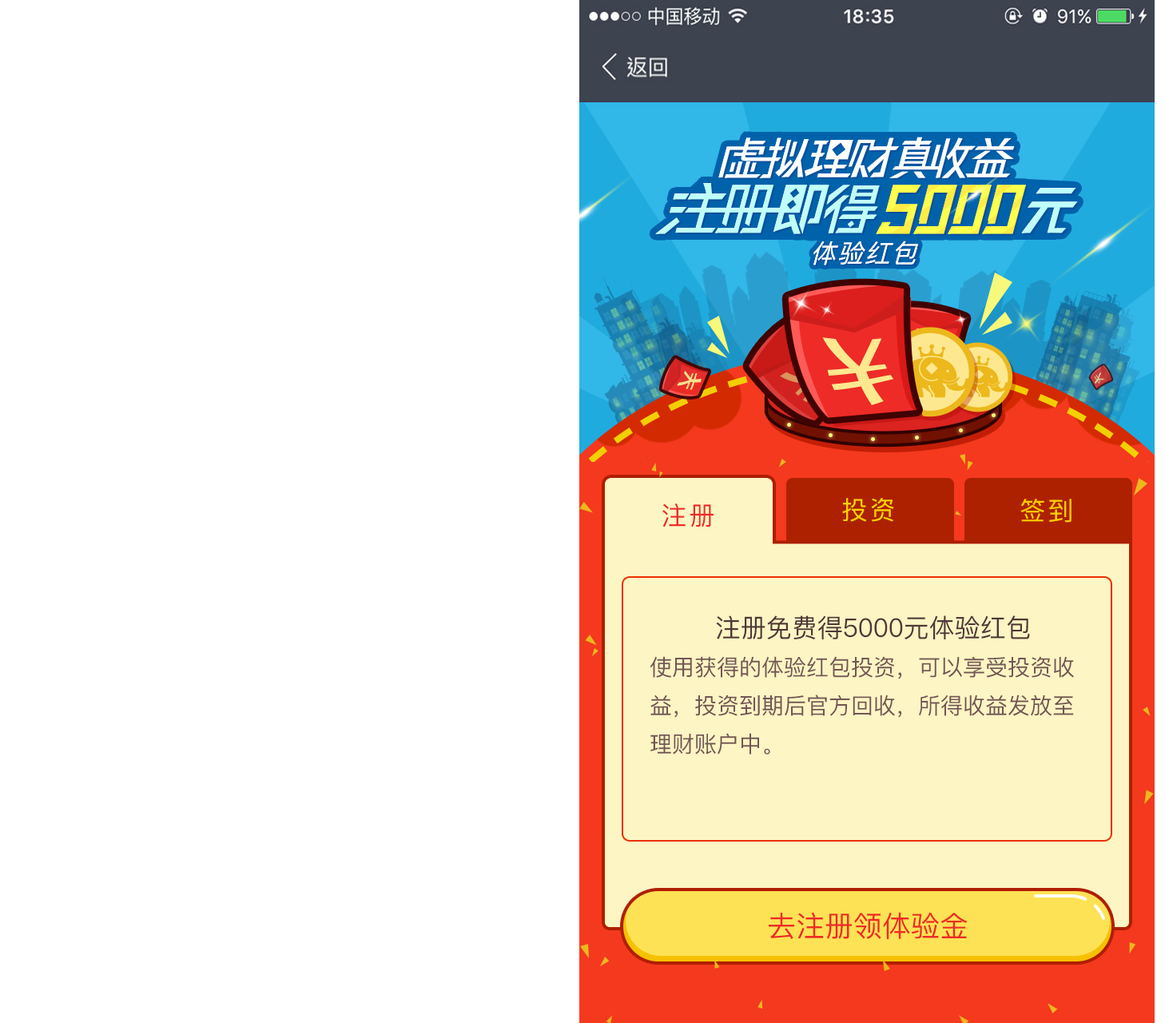
<style>
.page{position:relative;width:1165px;height:1023px;background:#ffffff}
.page>*{position:absolute;margin:0}
.t1{font:26.3px "PingFangSC-Regular";color:#ffffff;scale:0.97 1}
.t2{font:25.6px "PingFangSC-Regular";letter-spacing:0.1em;color:#fcd301;text-transform:uppercase}
.t3{font:25.6px "PingFangSC-Regular";letter-spacing:0.1em;color:#ee2b27;text-transform:uppercase}
.t4{font:25.6px "PingFangSC-Regular";letter-spacing:0.1em;color:#ffcc00;text-transform:uppercase}
.t5{font:22.4px/38.4px "PingFangSC-Regular";color:#735554;text-transform:uppercase}
.t6{font:25.6px/38.4px "PingFangSC-Regular";color:#513736;text-transform:uppercase}
.t7{font:28.8px "PingFangSC-Regular";color:#ee2b27;text-transform:uppercase}
</style>
<div class="page">
<p class="t1" style="left:814px;top:241px;width:104px;height:24px">体验红包</p>
<p class="t1" style="left:814px;top:241px;width:104px;height:24px">体验红包</p>
<p class="t2" style="left:843px;top:498px;width:51px;height:24px">投资</p>
<p class="t3" style="left:663px;top:504px;width:51px;height:24px">注册</p>
<p class="t4" style="left:1021px;top:499px;width:51px;height:24px">签到</p>
<p class="t5" style="left:650px;top:615px;width:424px;height:140px;text-align:center"><span class="t6">注册免费得5000元体验红包<br></span>使用获得的体验红包投资，可以享受投资收益，投资到期后官方回收，所得收益发放至理财账户中。</p>
<p class="t7" style="left:769px;top:912px;width:199px;height:27px">去注册领体验金</p>
</div>
